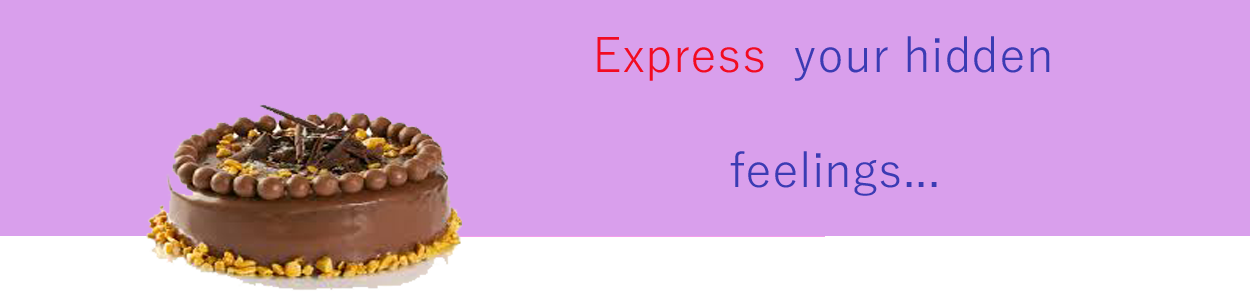
<style>
.page{position:relative;width:1250px;height:300px;background:#d99fec}
.page>*{position:absolute;margin:0}
.t1{font:48px "YuGothic-Regular";color:#3b3bb3}
.t2{font:48px "YuGothic-Regular";color:#f20b21}
</style>
<div class="page">
<p class="t1" style="left:597px;top:36px;width:453px;height:160px"><span class="t2">Express </span> your hidden<br>          <br>          feelings...</p>
</div>
